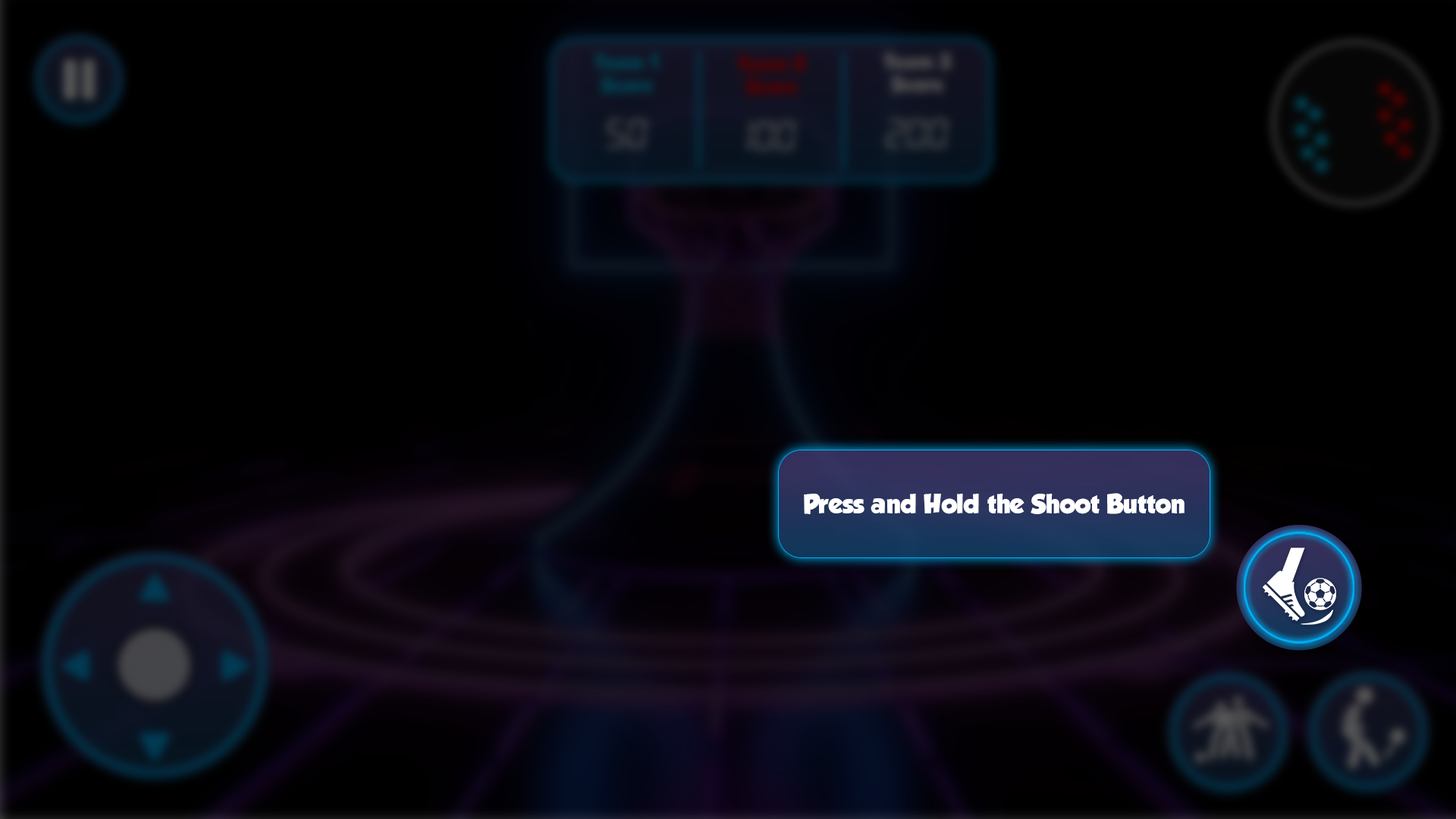
<style>
.page{position:relative;width:1456px;height:819px;background:#000000}
.page>*{position:absolute;margin:0}
.t1{font:24.3px "GROBOLD";color:#ffffff}
</style>
<div class="page">
<p class="t1" style="left:804px;top:493px;width:381px;height:21px">Press and Hold the Shoot Button</p>
</div>
